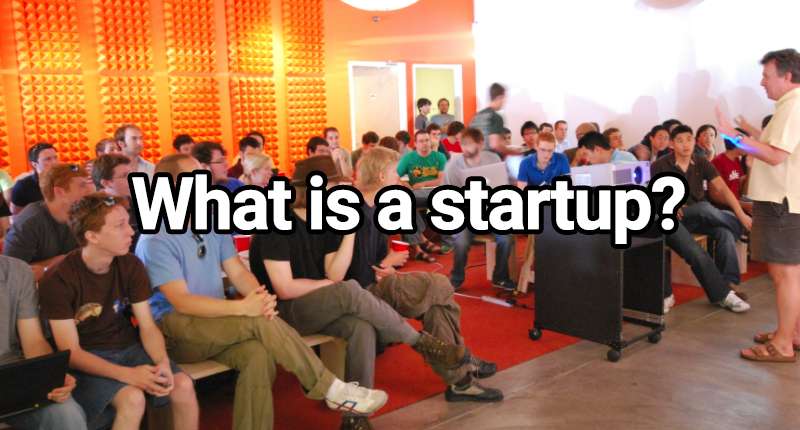
<style>
.page{position:relative;width:800px;height:430px}
.page>*{position:absolute;margin:0}
.t1{font:72px "Roboto-Bold";letter-spacing:-0.05em;color:#ffffff;font-weight:bold}
</style>
<div class="page">
<p class="t1" style="left:132px;top:174px;width:553px;height:70px">What is a startup?</p>
</div>
